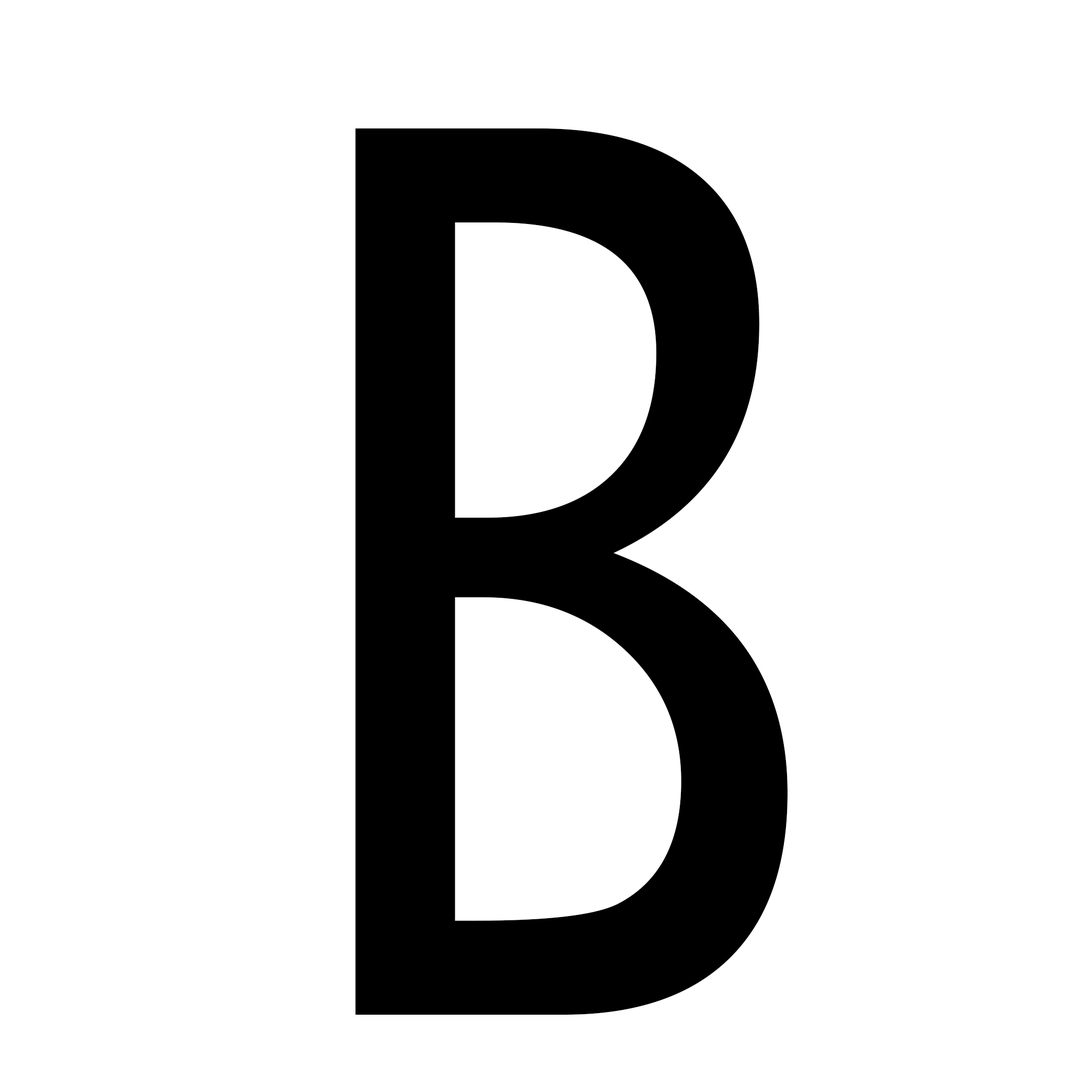
<style>
.page{position:relative;width:1092px;height:1092px;background:#ffffff}
.page>*{position:absolute;margin:0}
.t1{font:1226.4px "LucidaGrande";color:#000000;scale:0.8 1}
</style>
<div class="page">
<p class="t1" style="left:355px;top:128px;width:433px;height:887px">B</p>
</div>
